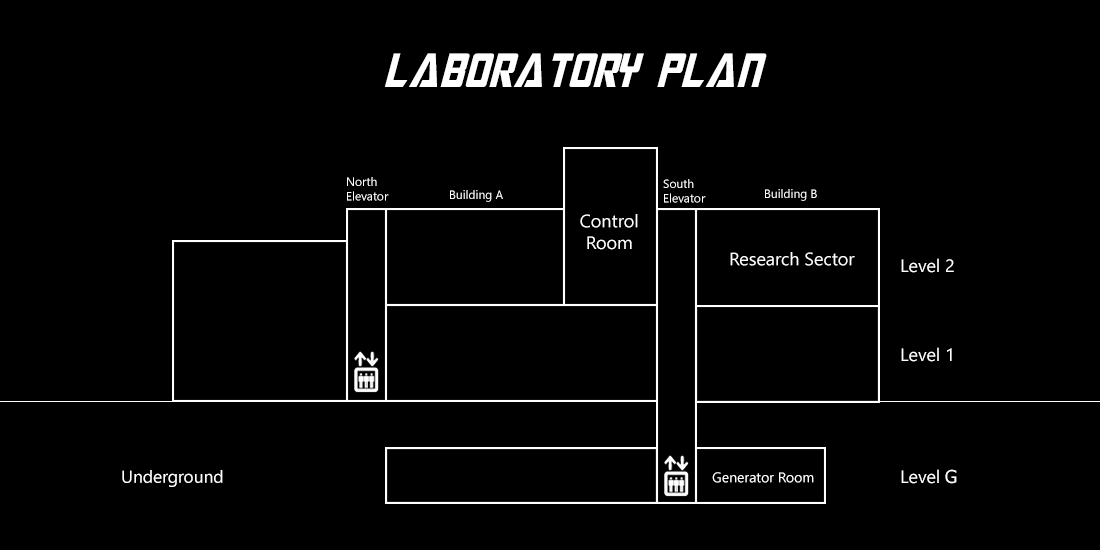
<style>
.page{position:relative;width:1100px;height:550px;background:#000000}
.page>*{position:absolute;margin:0}
.t1{font:48px "MegatronCondensed-Italic";color:#ffffff}
.t2{font:12px "SegoeUI";color:#ffffff}
.t3{font:18px "SegoeUI";color:#ffffff}
.t4{font:17.3px "SegoeUI";color:#ffffff}
.t5{font:14px "SegoeUI";color:#ffffff}
.t6{font:18px "Tahoma";color:#ffffff}
</style>
<div class="page">
<p class="t1" style="left:385px;top:53px;width:382px;height:34px">laboratory pLAn</p>
<p class="t2" style="left:347px;top:177px;width:42px;height:24px">North<br>Elevator</p>
<p class="t2" style="left:663px;top:179px;width:43px;height:24px">South<br>Elevator</p>
<p class="t2" style="left:450px;top:190px;width:53px;height:12px">Building A</p>
<p class="t2" style="left:765px;top:189px;width:52px;height:12px">Building B</p>
<p class="t3" style="left:580px;top:214px;width:58px;height:36px;text-align:center">Control<br>Room</p>
<p class="t3" style="left:730px;top:252px;width:125px;height:14px">Research Sector</p>
<p class="t3" style="left:901px;top:258px;width:53px;height:15px">Level 2</p>
<p class="t3" style="left:901px;top:347px;width:51px;height:15px">Level 1</p>
<p class="t4" style="left:122px;top:470px;width:101px;height:17px">Underground</p>
<p class="t5" style="left:712px;top:472px;width:102px;height:11px">Generator Room</p>
<p class="t3" style="left:901px;top:469px;width:56px;height:15px">Level <span class="t6">G</span></p>
</div>
